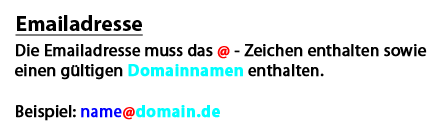
<style>
.page{position:relative;width:442px;height:136px;background:#ffffff}
.page>*{position:absolute;margin:0}
.t1{font:21.5px "MyriadPro-Bold";color:#000000;text-decoration:underline}
.t2{font:16.8px "MyriadPro-Regular";color:#000000;font-weight:bold}
.t3{font:16.8px "MyriadPro-Bold";color:#ff0000;font-weight:bold}
.t4{font:16.8px "MyriadPro-Bold";color:#00ffff;font-weight:bold}
.t5{font:16.8px "MyriadPro-Regular";color:#0000ff;font-weight:bold}
</style>
<div class="page">
<p class="t1" style="left:15px;top:15px;width:128px;height:21px">Emailadresse</p>
<p class="t2" style="left:15px;top:44px;width:412px;height:77px">Die Emailadresse muss das <span class="t3">@</span> - Zeichen enthalten sowie<br>einen gültigen <span class="t4">Domainnamen </span>enthalten.<br><br>Beispiel: <span class="t5">name</span><span class="t3">@</span><span class="t4">domain.de</span></p>
</div>
